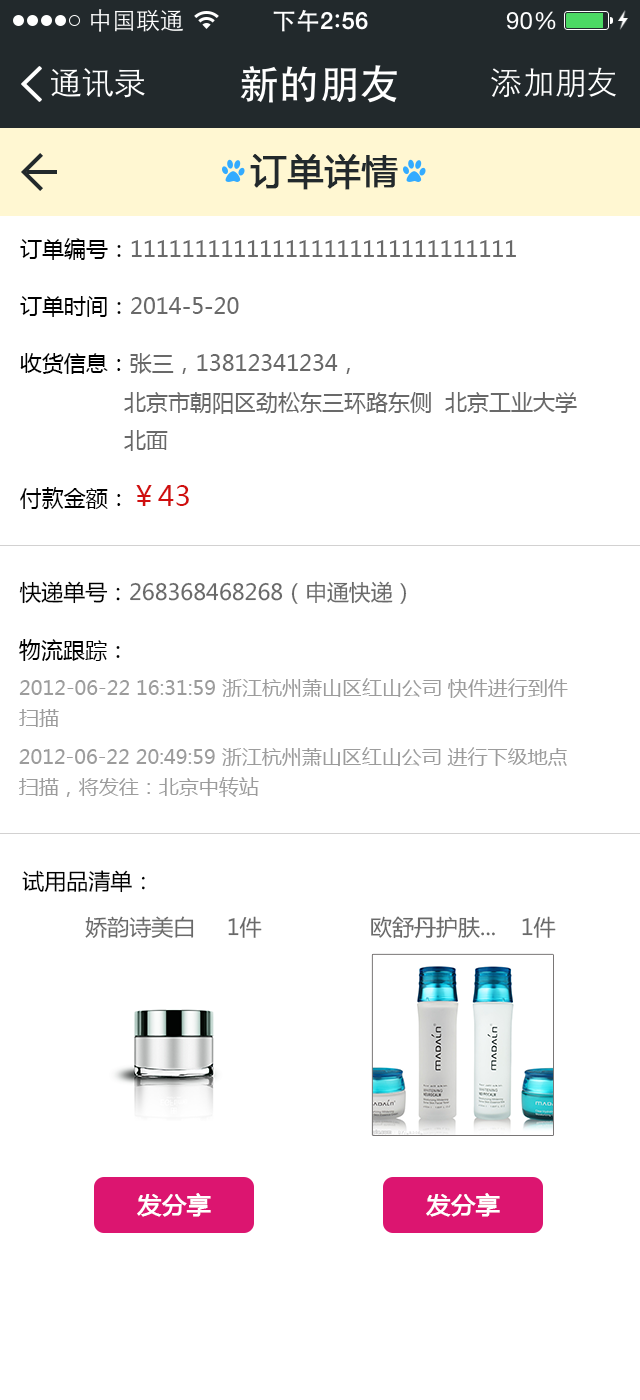
<style>
.page{position:relative;width:640px;height:1400px;background:#ffffff}
.page>*{position:absolute;margin:0}
.t1{font:36px "MicrosoftYaHei";color:#22292c;font-weight:bold}
.t2{font:22px "MicrosoftYaHei";color:#696969}
.t3{font:22px "MicrosoftYaHei";color:#000000}
.t4{font:28px "MicrosoftYaHei";color:#d00f0f}
.t5{font:20px/30px "MicrosoftYaHei";color:#9c9c9c}
.t6{font:22px "MicrosoftYaHei";letter-spacing:0.12em;color:#000000}
.t7{font:22px "MicrosoftYaHei";color:#010101}
.t8{font:24px "MicrosoftYaHei";color:#ffffff;font-weight:bold}
</style>
<div class="page">
<p class="t1" style="left:250px;top:154px;width:148px;height:36px">订单详情</p>
<p class="t2" style="left:20px;top:238px;width:496px;height:22px"><span class="t3">订单编号：</span>111111111111111111111111111111</p>
<p class="t2" style="left:20px;top:296px;width:219px;height:21px"><span class="t3">订单时间：</span>2014-5-20</p>
<p class="t2" style="left:20px;top:353px;width:557px;height:98px"><span class="t3">收货信息：</span>张三，13812341234，<br>                北京市朝阳区劲松东三环路东侧  北京工业大学<br>                北面</p>
<p class="t3" style="left:20px;top:485px;width:169px;height:24px">付款金额：<span class="t4">￥43</span></p>
<p class="t2" style="left:19px;top:581px;width:388px;height:23px"><span class="t3">快递单号：</span>268368468268（申通快递）</p>
<p class="t5" style="left:19px;top:639px;width:549px;height:88px"><span class="t3">物流跟踪</span><span class="t6">：<br></span>2012-06-22 16:31:59 浙江杭州萧山区红山公司 快件进行到件<br>扫描</p>
<p class="t5" style="left:19px;top:747px;width:548px;height:50px">2012-06-22 20:49:59 浙江杭州萧山区红山公司 进行下级地点<br>扫描，将发往：北京中转站</p>
<p class="t7" style="left:22px;top:870px;width:123px;height:23px">试用品清单：</p>
<p class="t2" style="left:85px;top:916px;width:109px;height:22px">娇韵诗美白</p>
<p class="t2" style="left:228px;top:916px;width:34px;height:22px">1件</p>
<p class="t2" style="left:371px;top:916px;width:124px;height:23px">欧舒丹护肤...</p>
<p class="t2" style="left:522px;top:916px;width:34px;height:22px">1件</p>
<p class="t8" style="left:137px;top:1193px;width:74px;height:24px">发分享</p>
<p class="t8" style="left:426px;top:1193px;width:74px;height:24px">发分享</p>
</div>
